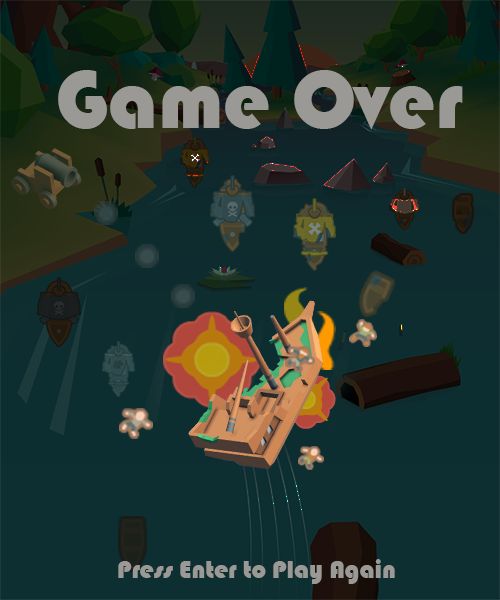
<style>
.page{position:relative;width:500px;height:600px}
.page>*{position:absolute;margin:0}
.t1{font:84.7px "Bauhaus93";color:#9a9995}
.t2{font:25.7px "Bauhaus93";color:#9a9995}
</style>
<div class="page">
<p class="t1" style="left:58px;top:70px;width:405px;height:60px">Game Over</p>
<p class="t2" style="left:118px;top:559px;width:277px;height:25px">Press Enter to Play Again</p>
</div>
